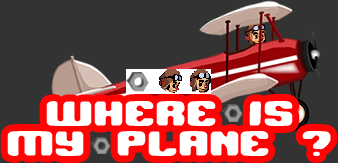
<style>
.page{position:relative;width:338px;height:163px;background:#333333}
.page>*{position:absolute;margin:0}
.t1{font:48px/30px "JawbreakerHardBRK";color:#ffffff}
</style>
<div class="page">
<p class="t1" style="left:7px;top:101px;width:324px;height:55px;text-align:center">WHERE IS<br>MY PLANE ?</p>
</div>
